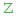
<style>
.page{position:relative;width:16px;height:16px;background:#ffffff}
.page>*{position:absolute;margin:0}
.t1{font:16px "STKaiti";color:#4caf50}
</style>
<div class="page">
<p class="t1" style="left:3px;top:2px;width:10px;height:11px">Z</p>
</div>
